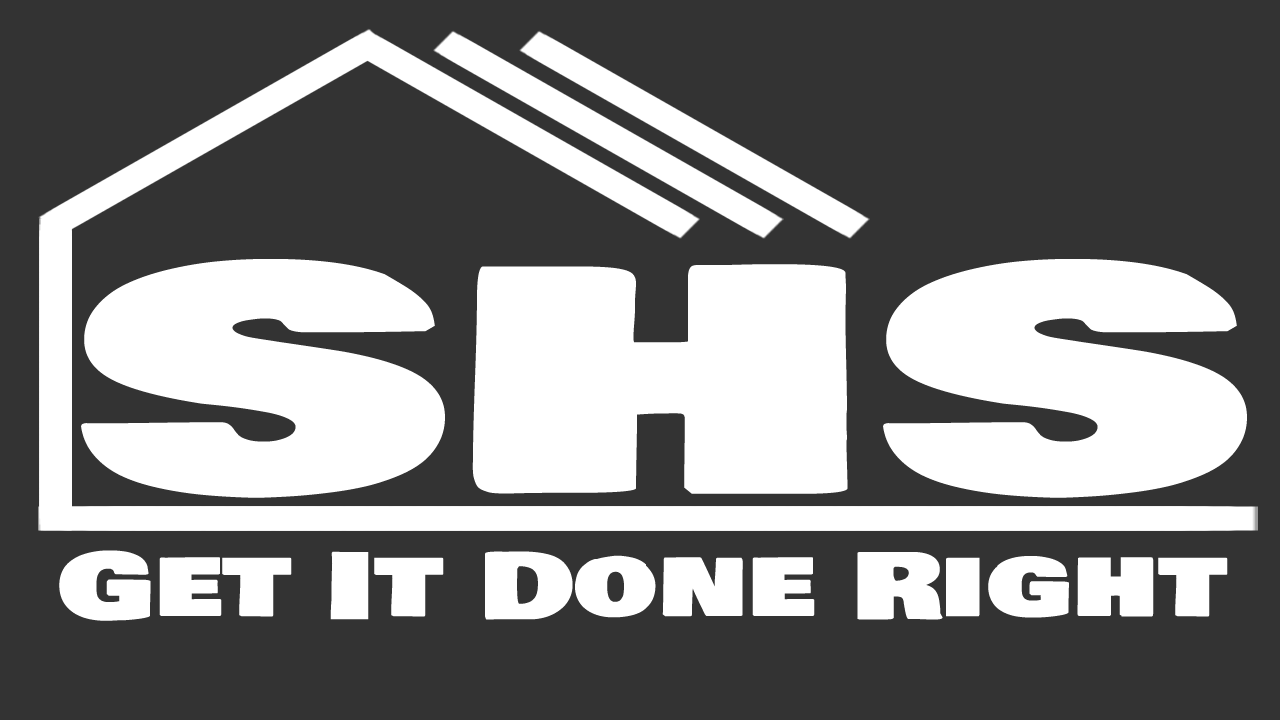
<style>
.page{position:relative;width:1280px;height:720px;background:#333333}
.page>*{position:absolute;margin:0}
.t1{font:302.7px "BowlbyOneSC-Regular";color:#ffffff;scale:1.73 1}
.t2{font:89.7px "BowlbyOneSC-Regular";color:#ffffff;scale:1.32 1}
</style>
<div class="page">
<p class="t1" style="left:81px;top:259px;width:1166px;height:239px">SHS</p>
<p class="t2" style="left:59px;top:550px;width:1169px;height:71px">Get It Done Right</p>
</div>
